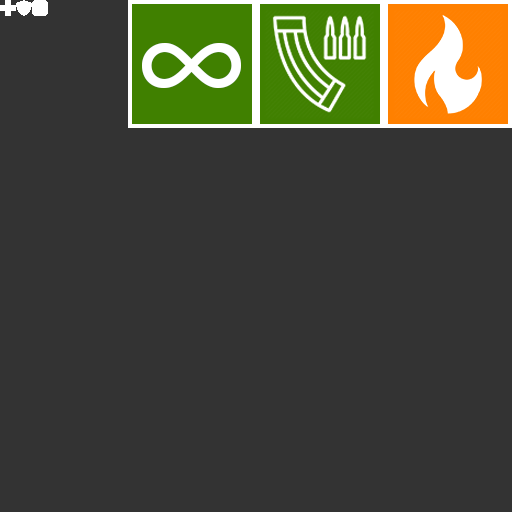
<style>
.page{position:relative;width:512px;height:512px;background:#333333}
.page>*{position:absolute;margin:0}
.t1{font:150.2px "MyriadPro-Regular";color:#ffffff}
</style>
<div class="page">
<p class="t1" style="left:142px;top:43px;width:99px;height:45px">∞</p>
</div>
